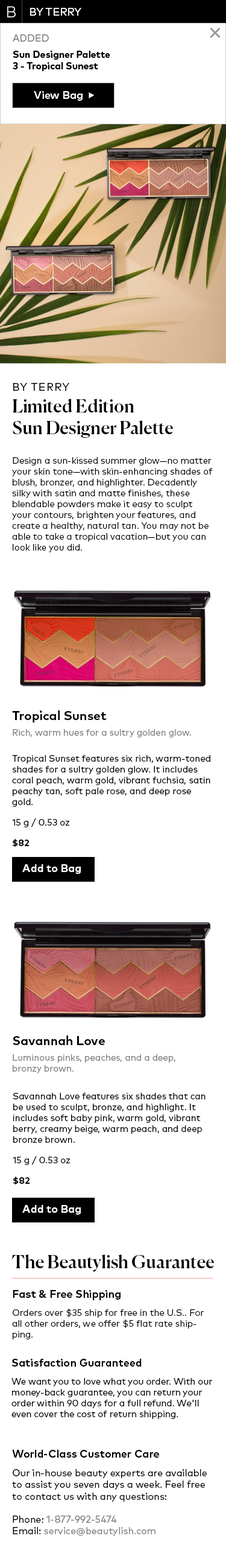
<style>
.page{position:relative;width:226px;height:1568px;background:#ffffff}
.page>*{position:absolute;margin:0}
.t1{font:10.9px "MarkOT-Book";color:#ffffff}
.t2{font:18.1px "Canela-Medium";color:#000000}
.t3{font:10.9px "MarkOT";letter-spacing:0.066em;color:#000000}
.t4{font:9px "MarkOT";color:#000000}
.t5{font:12.7px "MarkOT-Bold";color:#000000}
.t6{font:9px "MarkOT-Book";color:#808080}
.t7{font:9px "MarkOT-Book";color:#000000}
.t8{font:9px "MarkOT-Bold";color:#000000}
.t9{font:10.9px "MarkOT-Bold";color:#ffffff}
.t10{font:10.9px "MarkOT-Bold";color:#000000}
.t11{font:9.6px "MarkOT-Book";color:#000000}
.t12{font:9.6px "MarkOT-Book";color:#808080}
</style>
<div class="page">
<p class="t1" style="left:30px;top:8px;width:51px;height:8px">BY TERRY</p>
<p class="t2" style="left:13px;top:383px;width:160px;height:55px"><span class="t3">BY TERRY <br></span>Limited Edition <br>Sun Designer Palette</p>
<p class="t4" style="left:12px;top:457px;width:201px;height:95px">Design a sun-kissed summer glow—no matter your skin tone—with skin-enhancing shades of blush, bronzer, and highlighter. Decadently silky with satin and matte finishes, these blendable powders make it easy to sculpt your contours, brighten your features, and create a healthy, natural tan. You may not be able to take a tropical vacation—but you can look like you did.</p>
<p class="t5" style="left:12px;top:710px;width:95px;height:12px">Tropical Sunset</p>
<p class="t6" style="left:13px;top:729px;width:178px;height:9px">Rich, warm hues for a sultry golden glow.</p>
<p class="t7" style="left:12px;top:755px;width:198px;height:92px">Tropical Sunset features six rich, warm-toned shades for a sultry golden glow. It includes coral peach, warm gold, vibrant fuchsia, satin peachy tan, soft pale rose, and deep rose gold.<br>15 g / 0.53 oz<br><span class="t8">$82<br></span><br>asdf<br><br>$82<br><br>$82</p>
<p class="t9" style="left:22px;top:864px;width:59px;height:10px">Add to Bag</p>
<p class="t5" style="left:13px;top:1035px;width:92px;height:10px">Savannah Love</p>
<p class="t6" style="left:13px;top:1054px;width:162px;height:19px">Luminous pinks, peaches, and a deep, <br>bronzy brown.</p>
<p class="t7" style="left:13px;top:1093px;width:193px;height:91px">Savannah Love features six shades that can be used to sculpt, bronze, and highlight. It includes soft baby pink, warm gold, vibrant berry, creamy beige, warm peach, and deep bronze brown.<br>15 g / 0.53 oz <br><span class="t8">$82</span></p>
<p class="t9" style="left:22px;top:1205px;width:59px;height:10px">Add to Bag</p>
<p class="t2" style="left:11px;top:1254px;width:203px;height:18px">The Beautylish Guarantee</p>
<p class="t4" style="left:12px;top:1290px;width:192px;height:49px"><span class="t10">Fast &amp; Free Shipping<br>  <br></span>Orders over $35 ship for free in the U.S.. For all other orders, we offer $5 flat rate shipping.</p>
<p class="t7" style="left:11px;top:1359px;width:202px;height:60px"><span class="t10">Satisfaction Guaranteed<br>   <br></span>We want you to love what you order. With our money-back guarantee, you can return your order within 90 days for a full refund. We'll even cover the cost of return shipping.</p>
<p class="t11" style="left:12px;top:1450px;width:195px;height:86px"><span class="t10">World-Class Customer Care<br> <br></span>Our in-house beauty experts are available to assist you seven days a week. Feel free to contact us with any questions:<br><br>Phone:<span class="t12"> 1-877-992-5474 <br></span>Email: <span class="t12">service@beautylish.com</span></p>
</div>
